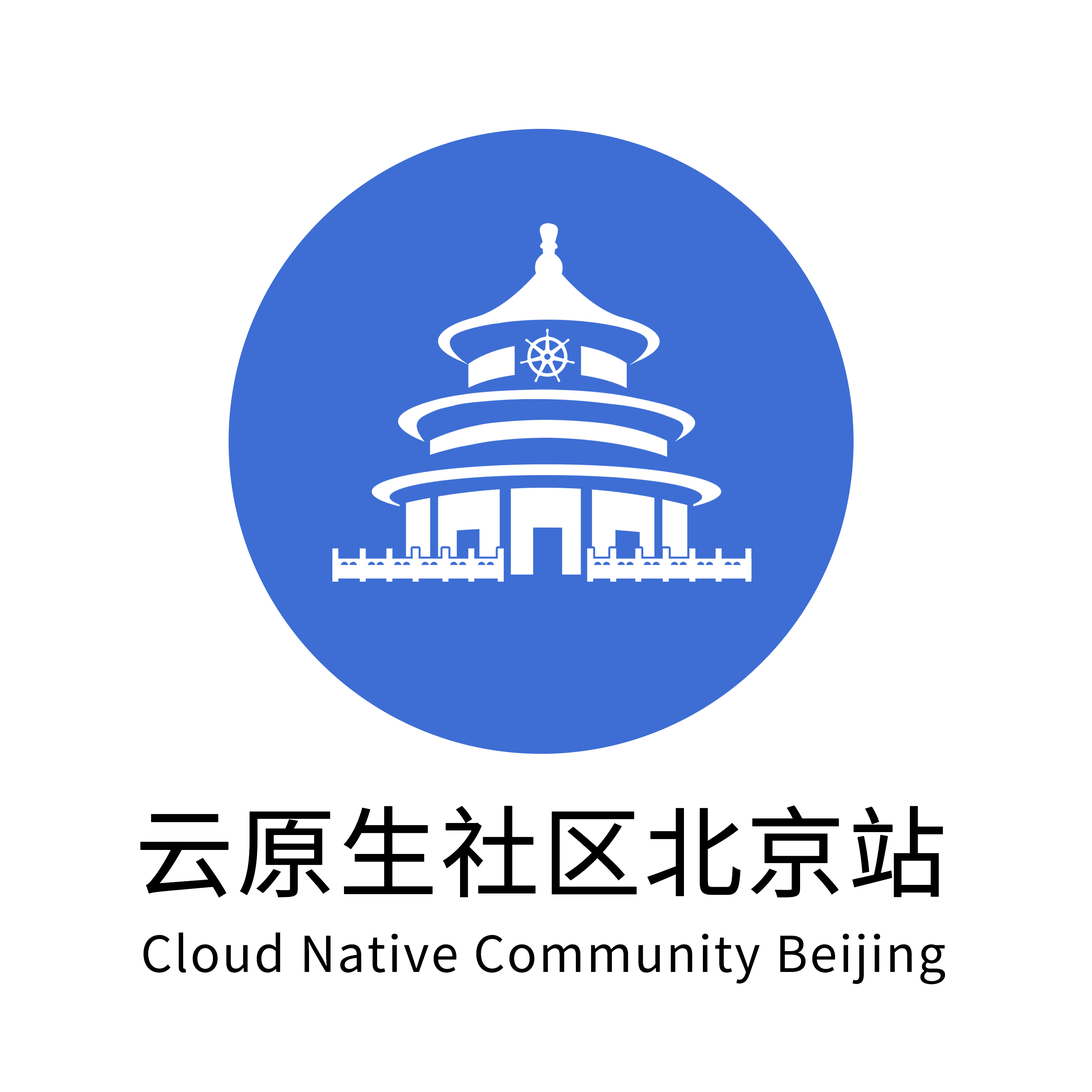
<style>
.page{position:relative;width:1092px;height:1092px;background:#ffffff}
.page>*{position:absolute;margin:0}
.t1{font:99.2px "SourceHanSansCN-Regular";color:#000000;text-transform:uppercase;font-weight:bold}
.t2{font:49.4px "SourceHanSansCN-Regular";letter-spacing:0.04em;color:#000000}
</style>
<div class="page">
<p class="t1" style="left:140px;top:805px;width:803px;height:93px">云原生社区北京站</p>
<p class="t2" style="left:143px;top:932px;width:802px;height:52px">Cloud Native Community Beijing</p>
</div>
